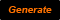
<style>
.page{position:relative;width:60px;height:20px;background:#000000}
.page>*{position:absolute;margin:0}
.t1{font:10px "Arial-BoldItalicMT";color:#ff7200}
</style>
<div class="page">
<p class="t1" style="left:8px;top:6px;width:44px;height:7px">Generate</p>
</div>
